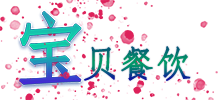
<style>
.page{position:relative;width:218px;height:100px;background:#ffffff}
.page>*{position:absolute;margin:0}
.t1{font:36px "FangSong";font-weight:bold}
</style>
<div class="page">
<p class="t1" style="left:84px;top:46px;width:107px;height:35px">贝餐饮</p>
</div>
